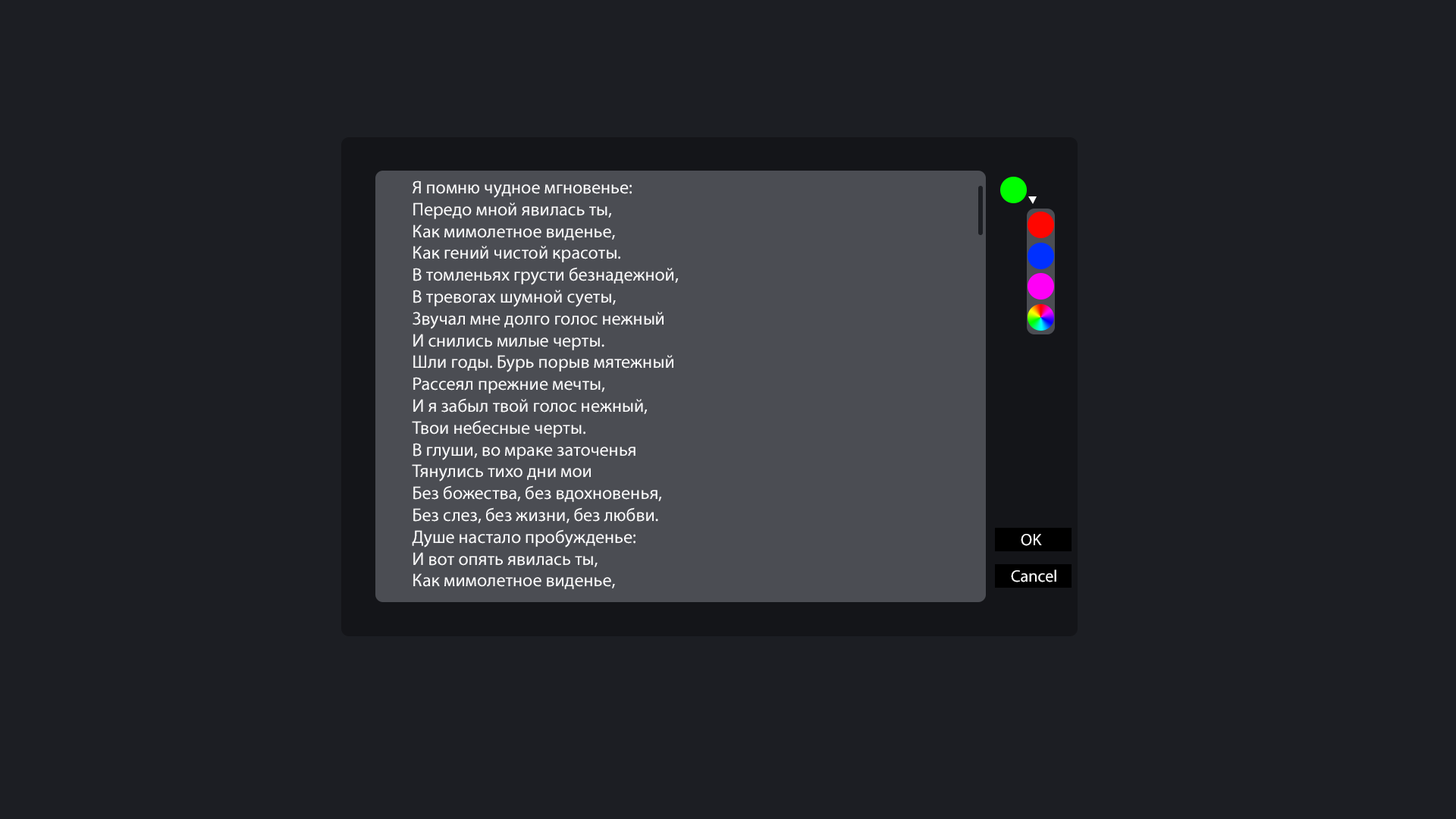
<style>
.page{position:relative;width:1456px;height:819px;background:#1c1e23}
.page>*{position:absolute;margin:0}
.t1{font:18.2px "MyriadPro-Regular";color:#fbfbfc}
.t2{font:16.7px "MyriadPro-Regular";color:#ffffff}
</style>
<div class="page">
<p class="t1" style="left:412px;top:180px;width:267px;height:409px">Я помню чудное мгновенье:<br>Передо мной явилась ты,<br>Как мимолетное виденье,<br>Как гений чистой красоты.<br>В томленьях грусти безнадежной,<br>В тревогах шумной суеты,<br>Звучал мне долго голос нежный<br>И снились милые черты.<br>Шли годы. Бурь порыв мятежный<br>Рассеял прежние мечты,<br>И я забыл твой голос нежный,<br>Твои небесные черты.<br>В глуши, во мраке заточенья<br>Тянулись тихо дни мои<br>Без божества, без вдохновенья,<br>Без слез, без жизни, без любви.<br>Душе настало пробужденье:<br>И вот опять явилась ты,<br>Как мимолетное виденье,</p>
<p class="t2" style="left:1021px;top:534px;width:21px;height:12px">OK</p>
<p class="t2" style="left:1011px;top:570px;width:45px;height:12px">Cancel</p>
</div>
